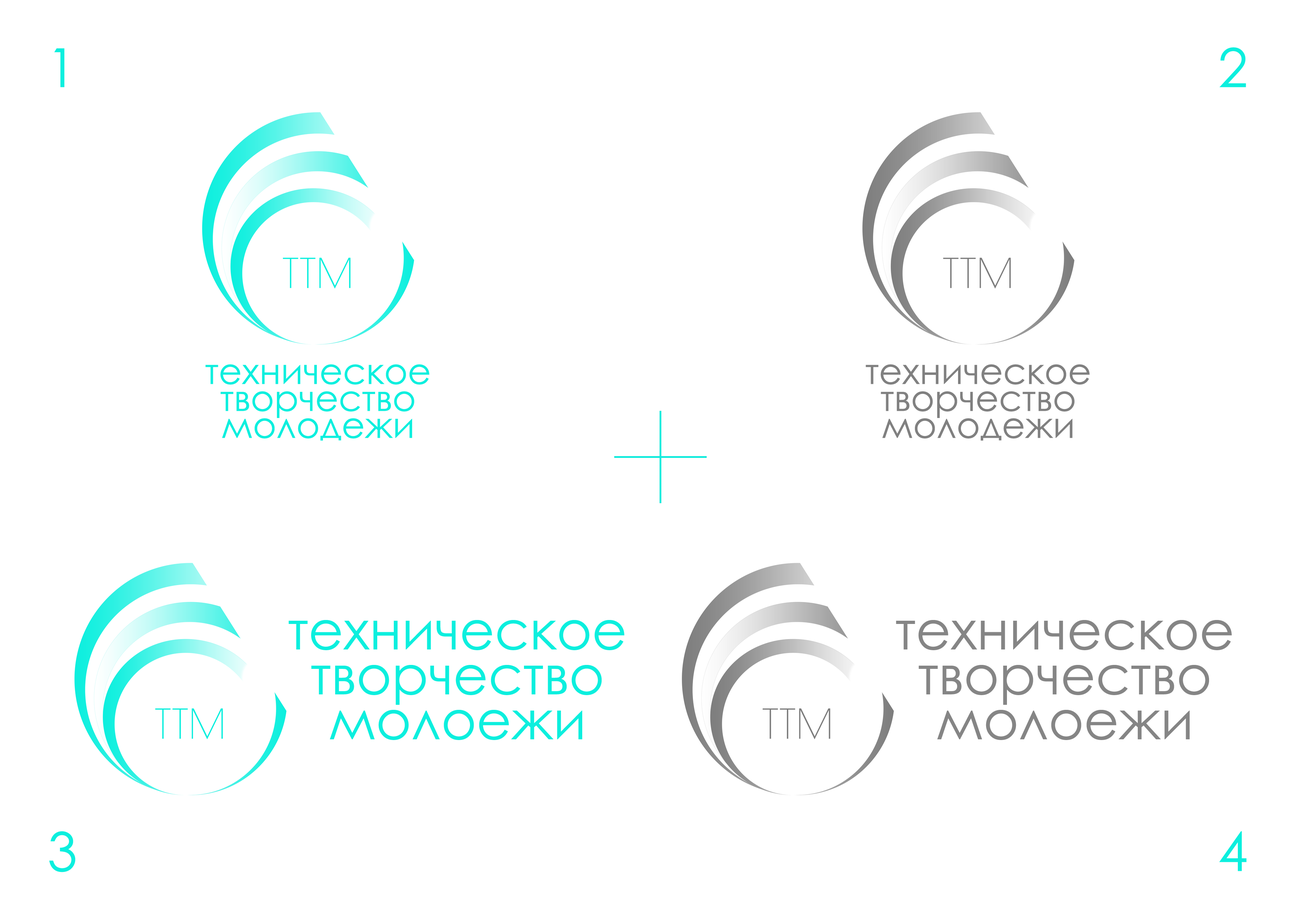
<style>
.page{position:relative;width:1304px;height:914px;background:#ffffff}
.page>*{position:absolute;margin:0}
.t1{font:53.9px "CenturyGothic";color:#0cefde}
.t2{font:36px/27px "CenturyGothic";color:#0cefde}
.t3{font:36px/27px "CenturyGothic";color:#808080}
.t4{font:53.9px/45px "CenturyGothic";color:#0cefde}
.t5{font:53.9px/36px "CenturyGothic";color:#0cefde}
.t6{font:53.9px/45px "CenturyGothic";color:#858585}
.t7{font:53.9px/36px "CenturyGothic";color:#858585}
</style>
<div class="page">
<p class="t1" style="left:54px;top:48px;width:10px;height:39px">1</p>
<p class="t1" style="left:1219px;top:47px;width:27px;height:40px">2</p>
<p class="t2" style="left:205px;top:364px;width:224px;height:77px;text-align:center">техническое творчество молодежи</p>
<p class="t3" style="left:866px;top:364px;width:224px;height:77px;text-align:center">техническое творчество молодежи</p>
<p class="t4" style="left:288px;top:620px;width:336px;height:120px;text-align:center"><span class="t5">техническое <br></span>творчество<br>молоежи</p>
<p class="t6" style="left:896px;top:620px;width:336px;height:120px;text-align:center"><span class="t7">техническое <br></span>творчество<br>молоежи</p>
<p class="t1" style="left:49px;top:831px;width:27px;height:42px">3</p>
<p class="t1" style="left:1219px;top:831px;width:27px;height:41px">4</p>
</div>
